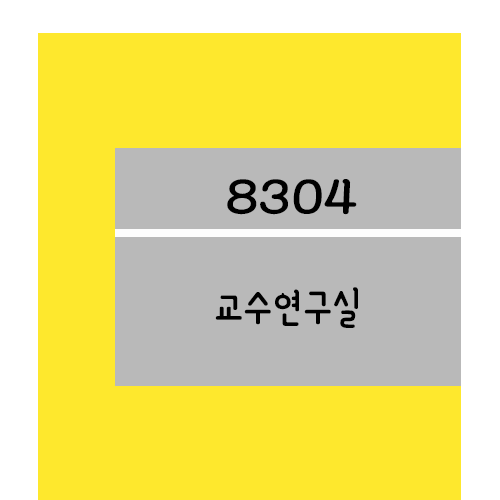
<style>
.page{position:relative;width:500px;height:500px;background:#fee82d}
.page>*{position:absolute;margin:0}
.t1{font:61.2px "YanoljaYacheR";color:#000000;scale:1.18 1}
.t2{font:48px "YanoljaYacheR";color:#000000}
</style>
<div class="page">
<p class="t1" style="left:227px;top:179px;width:130px;height:36px">8304</p>
<p class="t2" style="left:215px;top:287px;width:143px;height:41px">교수연구실</p>
</div>
